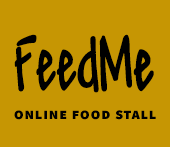
<style>
.page{position:relative;width:170px;height:147px;background:#c69603}
.page>*{position:absolute;margin:0}
.t1{font:76.8px "Andy";letter-spacing:-0.025em;color:#000000;scale:0.56 1}
.t2{font:76.8px "Andy";letter-spacing:-0.01em;color:#000000;font-weight:bold;scale:0.56 1}
.t3{font:16px "SourceSansPro-Black";letter-spacing:0.035em;color:#000000;font-variant:small-caps}
</style>
<div class="page">
<p class="t1" style="left:14px;top:34px;width:140px;height:59px">Feed<span class="t2">Me</span></p>
<p class="t3" style="left:14px;top:110px;width:142px;height:10px">online food stall</p>
</div>
